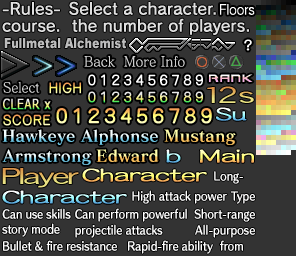
<style>
.page{position:relative;width:296px;height:256px;background:#333333}
.page>*{position:absolute;margin:0}
.t1{font:16px/17px "RodinNTLGPro-DB";color:#dfdfdf}
.t2{font:13.4px "RodinNTLGPro-M";color:#ffffff;scale:0.91 1}
.t3{font:14px "MatissePro-M";color:#cecece;scale:0.92 1}
.t4{font:14px "MatissePro-M";color:#cecece;scale:0.94 1}
.t5{font:14px "MatissePro-M";color:#cecece;scale:0.9 1}
.t6{font:16px "MatisseProN-B";letter-spacing:0.01em}
.t7{font:11px "HummingStd-B";color:#ffffff;scale:0.85 1}
.t8{font:11px "HummingStd-B";color:#ffffff;scale:0.87 1}
.t9{font:11px "HummingStd-B";color:#fffefe;scale:0.87 1}
.t10{font:11px/15px "HummingStd-B";color:#ffffff;scale:0.85 1}
.t11{font:11px/17px "HummingStd-B";color:#ffffff;scale:0.85 1}
.t12{font:11px/17px "HummingStd-B";color:#ffffff;scale:0.87 1}
.t13{font:11px/16px "HummingStd-B";color:#ffffff;scale:0.87 1}
</style>
<div class="page">
<p class="t1" style="left:2px;top:1px;width:247px;height:34px">-Rules-  Select a character. <br>course.  the number of players.</p>
<p class="t2" style="left:220px;top:4px;width:35px;height:11px">Floors</p>
<p class="t3" style="left:84px;top:56px;width:101px;height:11px"><span class="t4">Back  </span>More Info</p>
<p class="t5" style="left:3px;top:82px;width:37px;height:11px">Select</p>
<p class="t6" style="left:2px;top:129px;width:156px;height:16px">Hawkeye Alphonse</p>
<p class="t6" style="left:164px;top:129px;width:72px;height:16px">Mustang</p>
<p class="t6" style="left:2px;top:149px;width:90px;height:16px">Armstrong</p>
<p class="t6" style="left:96px;top:149px;width:63px;height:13px">Edward</p>
<p class="t7" style="left:214px;top:171px;width:29px;height:13px">Long-</p>
<p class="t8" style="left:132px;top:190px;width:95px;height:14px">High attack power</p>
<p class="t9" style="left:230px;top:191px;width:25px;height:13px">Type</p>
<p class="t10" style="left:2px;top:208px;width:241px;height:46px">Can use skills<br>story mode            <br><span class="t11">Bullet &amp; fire resistance   </span><span class="t12">Rapid-fire ability  </span><span class="t11">from</span></p>
<p class="t10" style="left:75px;top:208px;width:180px;height:30px">Can perform powerful  Short-range<br>projectile attacks          <span class="t13">All-purpose</span></p>
</div>
